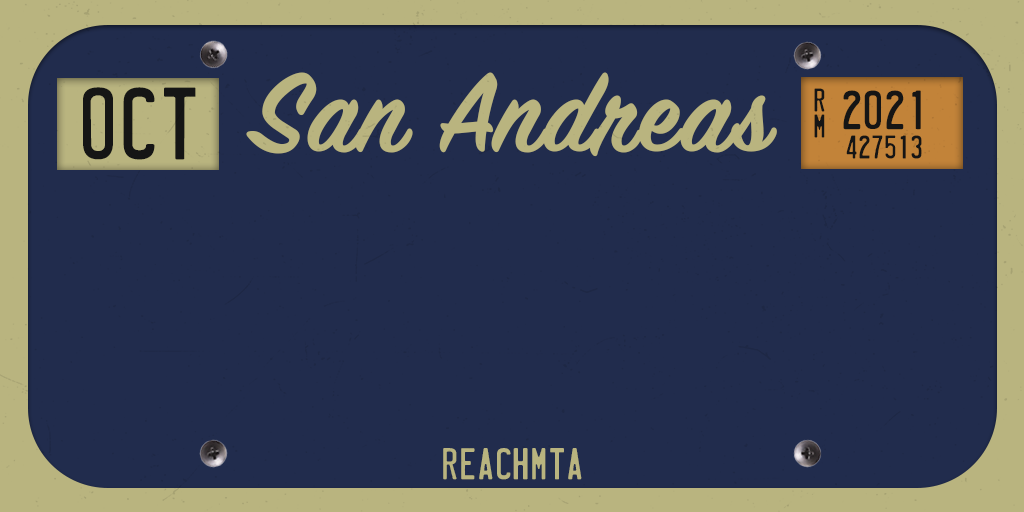
<style>
.page{position:relative;width:1024px;height:512px;background:#212c4d}
.page>*{position:absolute;margin:0}
.t1{font:120px "SignPainterHouseScript";color:#b9b47f;font-weight:bold}
.t2{font:92.2px "LicensePlate";color:#151515}
.t3{font:29.6px "LicensePlate";color:#151515}
.t4{font:49.4px "LicensePlate";color:#151515}
.t5{font:40px "LicensePlate";letter-spacing:0.005em;color:#b9b47f}
</style>
<div class="page">
<p class="t1" style="left:246px;top:72px;width:531px;height:85px">San Andreas</p>
<p class="t2" style="left:83px;top:87px;width:113px;height:73px">OCT</p>
<p class="t3" style="left:814px;top:88px;width:11px;height:24px">R</p>
<p class="t4" style="left:843px;top:90px;width:78px;height:40px">2021</p>
<p class="t3" style="left:814px;top:114px;width:11px;height:24px">m</p>
<p class="t3" style="left:846px;top:135px;width:76px;height:24px">427513</p>
<p class="t5" style="left:443px;top:448px;width:139px;height:32px">REACHMTA</p>
</div>
